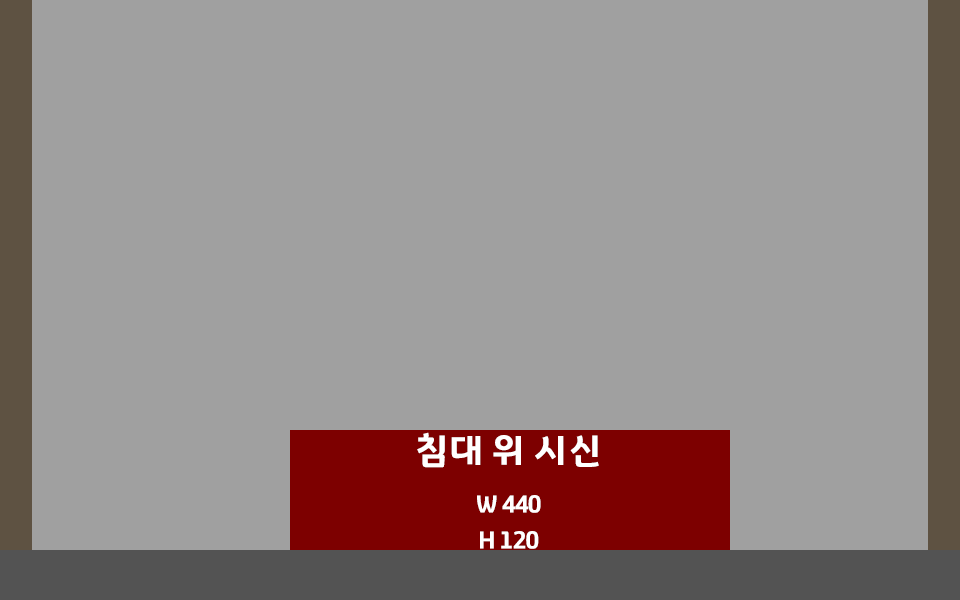
<style>
.page{position:relative;width:960px;height:600px;background:#a0a0a0}
.page>*{position:absolute;margin:0}
.t1{font:24px/36px "GyeonggiTitleV";letter-spacing:-0.05em;color:#ffffff}
.t2{font:36px/12px "GyeonggiTitleV";letter-spacing:-0.05em;color:#ffffff}
</style>
<div class="page">
<p class="t1" style="left:417px;top:432px;width:182px;height:117px;text-align:center"><span class="t2">침대 위 시신<br><br></span><br>W 440<br>H 120</p>
</div>
